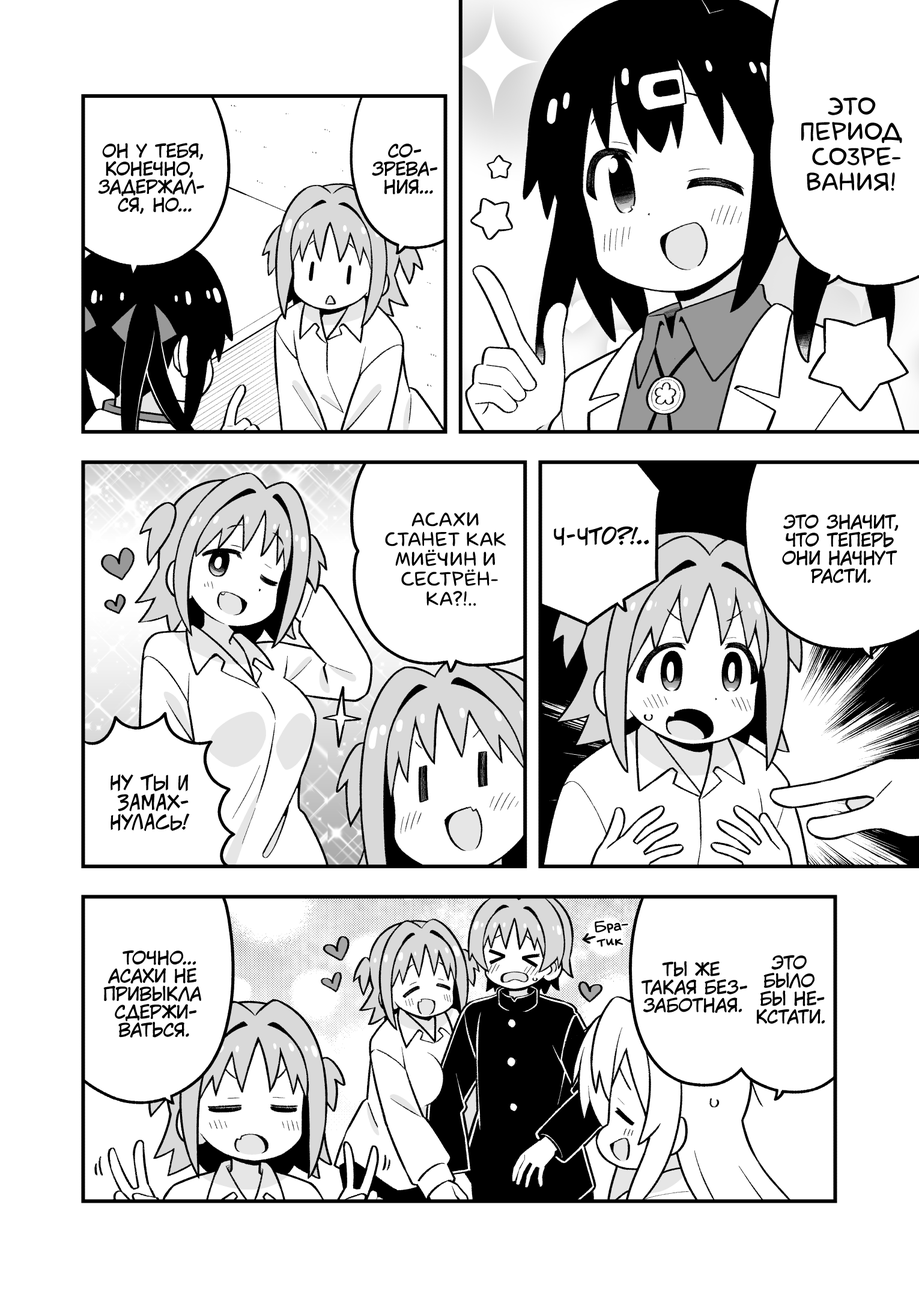
<style>
.page{position:relative;width:919px;height:1297px;background:#ffffff}
.page>*{position:absolute;margin:0}
.t1{font:25.2px "laCartoonerie";color:#000000;text-transform:uppercase}
.t2{font:18px "KuraiVoice2";color:#000000;text-transform:uppercase}
.t3{font:19.8px "laCartoonerie";color:#000000;text-transform:uppercase}
.t4{font:21.6px "v_CCJeffCampbell";color:#000000;text-transform:uppercase}
.t5{font:19.8px "v_CCJeffCampbell";color:#000000;text-transform:uppercase}
.t6{font:14.4px "v_Augie";color:#000000;font-weight:bold}
</style>
<div class="page">
<p class="t1" style="left:801px;top:97px;width:101px;height:94px;text-align:center">Это<br>период<br>созре-<br>вания!</p>
<p class="t2" style="left:98px;top:143px;width:106px;height:71px;text-align:center">Он у тебя,<br>конечно,<br>задержал-<br>ся, но...</p>
<p class="t2" style="left:372px;top:144px;width:65px;height:51px;text-align:center">Со-<br>зрева-<br>ния...</p>
<p class="t3" style="left:385px;top:512px;width:121px;height:94px;text-align:center">Асахи<br>станет как<br>Миёчин и<br>сестрён-<br>ка?!..</p>
<p class="t2" style="left:782px;top:514px;width:117px;height:70px;text-align:center">Это значит,<br>что теперь<br>они начнут<br>расти.</p>
<p class="t4" style="left:554px;top:526px;width:95px;height:20px">Ч-что?!..</p>
<p class="t5" style="left:111px;top:774px;width:79px;height:57px;text-align:center">Ну ты и<br>замах-<br>нулась!</p>
<p class="t6" style="left:595px;top:921px;width:33px;height:26px;text-align:center;rotate:-5deg">Бра-<br>тик</p>
<p class="t2" style="left:103px;top:950px;width:98px;height:88px;text-align:center">Точно...<br>Асахи не<br>привыкла<br>сдержи-<br>ваться.</p>
<p class="t2" style="left:642px;top:961px;width:105px;height:52px;text-align:center">Ты же<br>такая без-<br>заботная.</p>
<p class="t2" style="left:756px;top:955px;width:69px;height:70px;text-align:center">Это<br>было<br>бы не-<br>кстати.</p>
</div>
